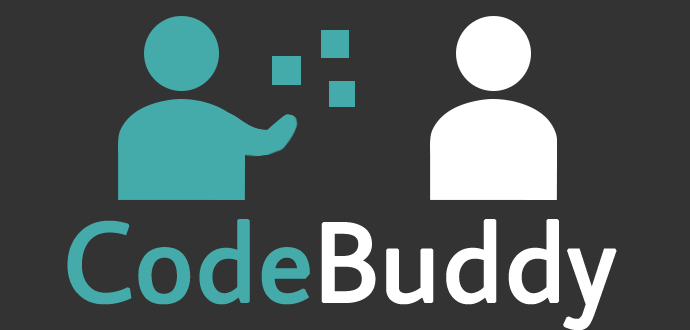
<style>
.page{position:relative;width:690px;height:330px;background:#333333}
.page>*{position:absolute;margin:0}
.t1{font:112.5px "AverageSans-Regular";color:#ffffff;font-weight:bold}
.t2{font:112.5px "AverageSans-Regular";color:#44abaa;font-weight:bold}
</style>
<div class="page">
<p class="t1" style="left:67px;top:219px;width:550px;height:112px"><span class="t2">Code</span>Buddy</p>
</div>
